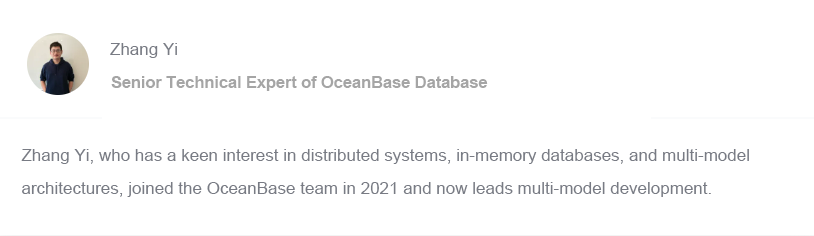
<style>
.page{position:relative;width:814px;height:236px;background:#ffffff}
.page>*{position:absolute;margin:0}
.t1{font:17px "ArialMT";color:#787b84}
.t2{font:17px "Arial-BoldMT";letter-spacing:-0.02em;color:#a5a5a5}
.t3{font:17px/33px "ArialMT";color:#787b84}
</style>
<div class="page">
<p class="t1" style="left:110px;top:43px;width:67px;height:15px">Zhang Yi</p>
<p class="t2" style="left:111px;top:76px;width:377px;height:15px">Senior Technical Expert of OceanBase Database</p>
<p class="t3" style="left:21px;top:149px;width:728px;height:48px">Zhang Yi, who has a keen interest in distributed systems, in-memory databases, and multi-model architectures, joined the OceanBase team in 2021 and now leads multi-model development.</p>
</div>
